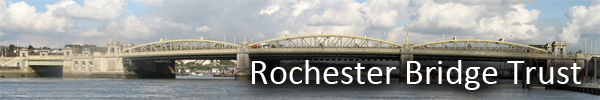
<style>
.page{position:relative;width:600px;height:100px}
.page>*{position:absolute;margin:0}
.t1{font:36px "Calibri";color:#ffffff}
</style>
<div class="page">
<p class="t1" style="left:252px;top:60px;width:329px;height:30px">Rochester Bridge Trust</p>
</div>
